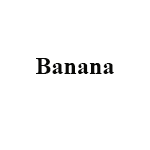
<style>
.page{position:relative;width:150px;height:150px;background:#ffffff}
.page>*{position:absolute;margin:0}
.t1{font:24px "TimesNewRomanPS-BoldMT";color:#090907}
</style>
<div class="page">
<p class="t1" style="left:36px;top:58px;width:78px;height:16px">Banana</p>
</div>
